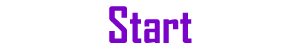
<style>
.page{position:relative;width:300px;height:50px;background:#ffffff}
.page>*{position:absolute;margin:0}
.t1{font:48px "AgencyFB-Bold";color:#7b02c9}
</style>
<div class="page">
<p class="t1" style="left:109px;top:6px;width:83px;height:37px">Start</p>
</div>
